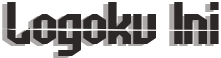
<style>
.page{position:relative;width:221px;height:58px;background:#ffffff}
.page>*{position:absolute;margin:0}
.t1{font:60px "ArcheryBlack"}
.t2{font:60px "ArcheryBlack";color:#2d2727}
</style>
<div class="page">
<p class="t1" style="left:2px;top:4px;width:212px;height:54px">Logoku Ini</p>
<p class="t2" style="left:7px;top:2px;width:212px;height:54px">Logoku Ini</p>
</div>
